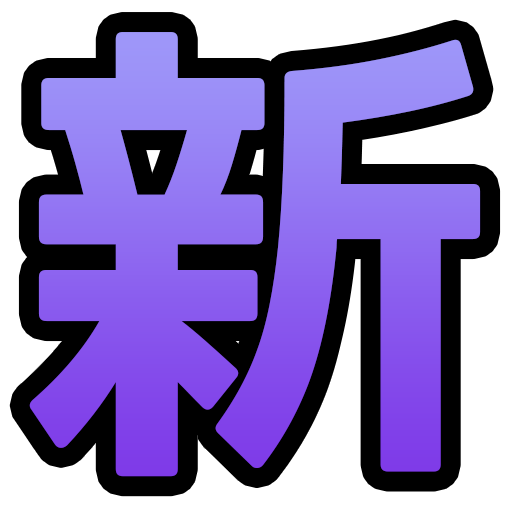
<style>
.page{position:relative;width:512px;height:512px;background:#ffffff}
.page>*{position:absolute;margin:0}
.t1{font:480px "07YasashisaGothicBold"}
</style>
<div class="page">
<p class="t1" style="left:29px;top:32px;width:452px;height:445px">新</p>
</div>
